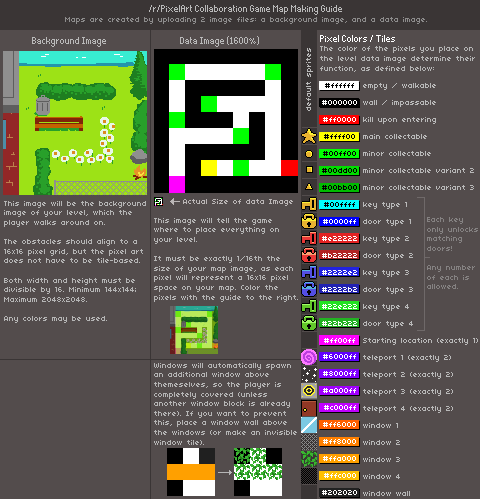
<style>
.page{position:relative;width:480px;height:499px;background:#534c4c}
.page>*{position:absolute;margin:0}
.t1{font:16px "Thintel";color:#bababa}
.t2{font:8px "04b03";color:#8d8c8c}
.t3{font:8px "04b03";color:#b5b5b5}
.t4{font:16px "Thintel";color:#ffffff}
.t5{font:8px "04b03";color:#bababa}
.t6{font:8px/17px "04b03";color:#ffffff}
.t7{font:8px/17px "04b03";color:#000000}
.t8{font:8px/16px "04b03";color:#ffffff}
.t9{font:8px/17px "04b03";color:#b9b9b9}
.t10{font:8px "04b03";color:#bbb6b6}
.t11{font:8px "04b03";color:#858282}
</style>
<div class="page">
<p class="t1" style="left:149px;top:5px;width:193px;height:10px">/r/PixelArt Collaboration Game Map Making Guide</p>
<p class="t2" style="left:65px;top:17px;width:362px;height:7px">Maps are created by uploading 2 image files: a background image, and a data image.</p>
<p class="t1" style="left:32px;top:37px;width:74px;height:10px">Background Image</p>
<p class="t1" style="left:180px;top:36px;width:79px;height:11px">Data Image (1600%)</p>
<p class="t3" style="left:320px;top:35px;width:155px;height:37px"><span class="t4">Pixel Colors / Tiles<br></span>The color of the pixels you place on the level data image determine their function, as defined below:</p>
<p class="t5" style="left:306px;top:48px;width:7px;height:63px;rotate:-90deg">default sprites</p>
<p class="t6" style="left:322px;top:83px;width:35px;height:412px;text-align:center"><span class="t7">#ffffff<br></span>#000000<br>#ff0000<br><span class="t7">#ffff00<br>#00ff00<br>#00dd00<br>#00bb00<br>#00ffff<br></span>#0000ff<br>#e22222<br>#b22222<br>#2222e2<br>#2222b2<br>#22e222<br>#22b222<br>#ff00ff<br><span class="t8">#6000ff<br></span>#8000ff<br>#a000ff<br>#c000ff<br>#ff6000<br>#ff8000<br>#ffa000<br>#ffc000<br>#202020</p>
<p class="t9" style="left:363px;top:83px;width:115px;height:413px">empty / walkable<br>wall / impassable<br>kill upon entering<br>main collectable<br>minor collectable<br>minor collectable variant 2<br>minor collectable variant 3<br>key type 1<br>door type 1<br>key type 2<br>door type 2<br>key type 3<br>door type 3<br>key type 4<br>door type 4<br>Starting location (exactly 1)<br>teleport 1 (exactly 2)<br>teleport 2 (exactly 2)<br>teleport 3 (exactly 2)<br>teleport 4 (exactly 2)<br>window 1<br>window 2<br>window 3<br>window 4<br>window wall</p>
<p class="t3" style="left:4px;top:201px;width:142px;height:122px">This image will be the background image of your level, which the player walks around on. <br><br>The obstacles should align to a 16x16 pixel grid, but the pixel art does not have to be tile-based.<br><br>Both width and height must be divisible by 16. Minimum 144x144; Maximum 2048x2048.<br><br>Any colors may be used.</p>
<p class="t10" style="left:183px;top:199px;width:110px;height:7px">Actual Size of data Image</p>
<p class="t3" style="left:154px;top:218px;width:144px;height:84px">This image will tell the game where to place everything on your level.<br><br>It must be exactly 1/16th the size of your map image, as each pixel will represent a 16x16 pixel space on your map. Color the pixels with the guide to the right.</p>
<p class="t11" style="left:427px;top:217px;width:51px;height:72px">Each key<br>only unlocks<br>matching <br>doors!<br><br>Any number <br>of each is<br>allowed.</p>
<p class="t3" style="left:154px;top:363px;width:143px;height:82px">Windows will automatically spawn <br>an additional window above themeselves, so the player is completely covered (unless another window block is already there). If you want to prevent this, place a window wall above the windows (or make an invisible window tile).</p>
</div>
